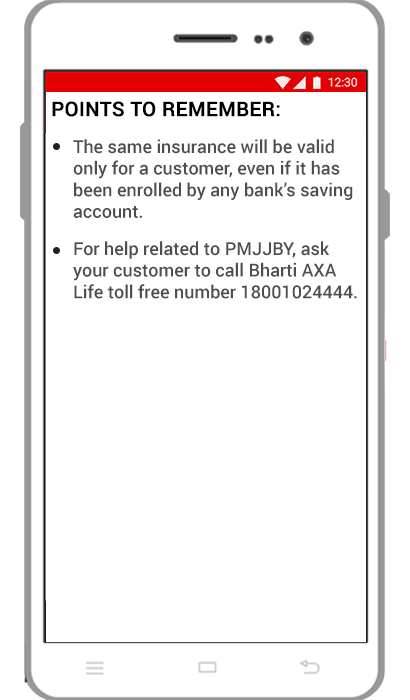
<style>
.page{position:relative;width:410px;height:700px;background:#ffffff}
.page>*{position:absolute;margin:0}
.t1{font:20px "Roboto-Medium";color:#000000;font-weight:bold}
.t2{font:18px "Roboto-Medium";color:#4e4e4e}
</style>
<div class="page">
<p class="t1" style="left:52px;top:101px;width:228px;height:16px">POINTS TO REMEMBER:</p>
<p class="t2" style="left:73px;top:139px;width:280px;height:79px">The same insurance will be valid <br>only for a customer, even if it has <br>been enrolled by any bank’s saving <br>account.</p>
<p class="t2" style="left:73px;top:241px;width:284px;height:58px">For help related to PMJJBY, ask <br>your customer to call Bharti AXA <br>Life toll free number 18001024444.</p>
</div>
